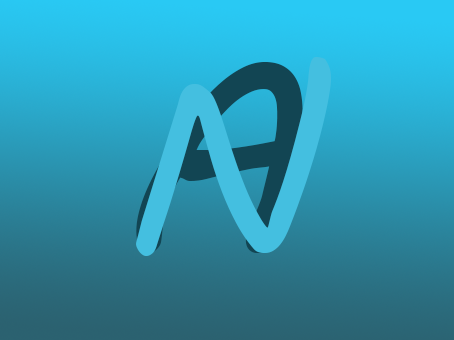
<style>
.page{position:relative;width:454px;height:340px}
.page>*{position:absolute;margin:0}
.t1{font:270px "MVBoli"}
.t2{font:250px "MVBoli";color:#44bfe0}
</style>
<div class="page">
<p class="t1" style="left:136px;top:62px;width:167px;height:191px">A</p>
<p class="t2" style="left:136px;top:57px;width:195px;height:199px">N</p>
</div>
